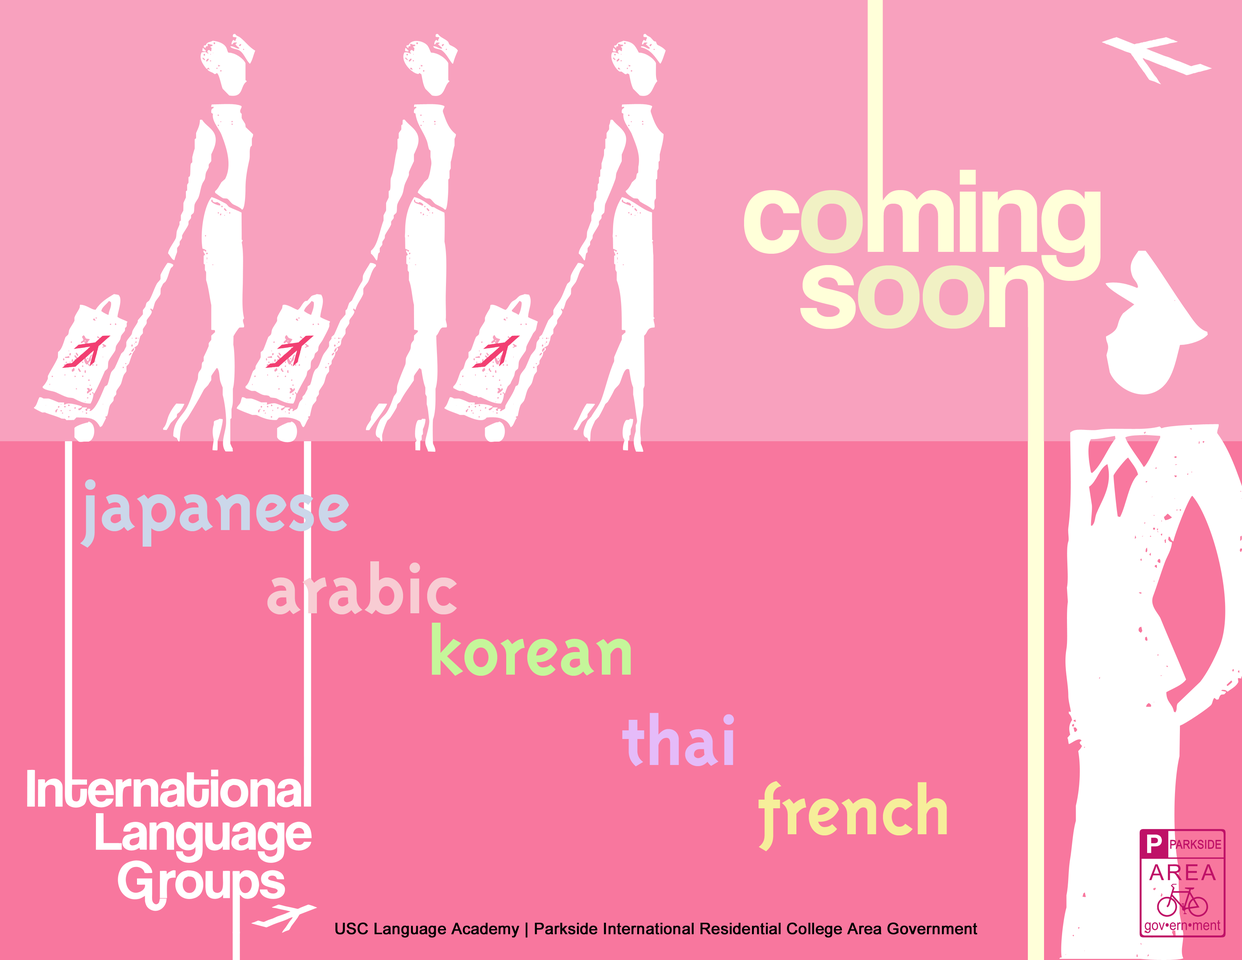
<style>
.page{position:relative;width:1242px;height:960px;background:#f8779e}
.page>*{position:absolute;margin:0}
.t1{font:112.9px/75.3px "Coolvetica";color:#ffffd9}
.t2{font:112.9px/75.3px "Coolvetica";color:#f1f1c4}
.t3{font:75.3px "TriplexBold";color:#cbd7ea}
.t4{font:75.3px "TriplexBold";color:#f8ccd3}
.t5{font:75.3px "TriplexBold";color:#c5f69a}
.t6{font:75.3px "TriplexBold";color:#e5bbf9}
.t7{font:75.3px "TriplexBold";color:#f6ee9a}
.t8{font:15.7px "ArialMT";color:#000000;font-weight:bold}
</style>
<div class="page">
<p class="t1" style="left:744px;top:170px;width:357px;height:159px;text-align:center">c<span class="t2">o</span>ming<br>s<span class="t2">oo</span>n</p>
<p class="t3" style="left:80px;top:479px;width:269px;height:69px">japanese</p>
<p class="t4" style="left:267px;top:561px;width:190px;height:53px">arabic</p>
<p class="t5" style="left:432px;top:623px;width:199px;height:53px">korean</p>
<p class="t6" style="left:622px;top:713px;width:112px;height:53px">thai</p>
<p class="t7" style="left:759px;top:781px;width:188px;height:70px">french</p>
<p class="t8" style="left:335px;top:922px;width:643px;height:16px">USC Language Academy | Parkside International Residential College Area Government</p>
</div>
